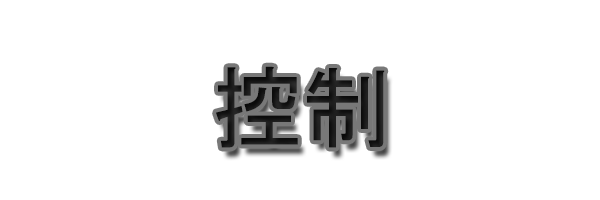
<style>
.page{position:relative;width:600px;height:200px;background:#ffffff}
.page>*{position:absolute;margin:0}
.t1{font:90px "MS-Gothic";color:#171717}
</style>
<div class="page">
<p class="t1" style="left:216px;top:66px;width:169px;height:82px">控制</p>
</div>
